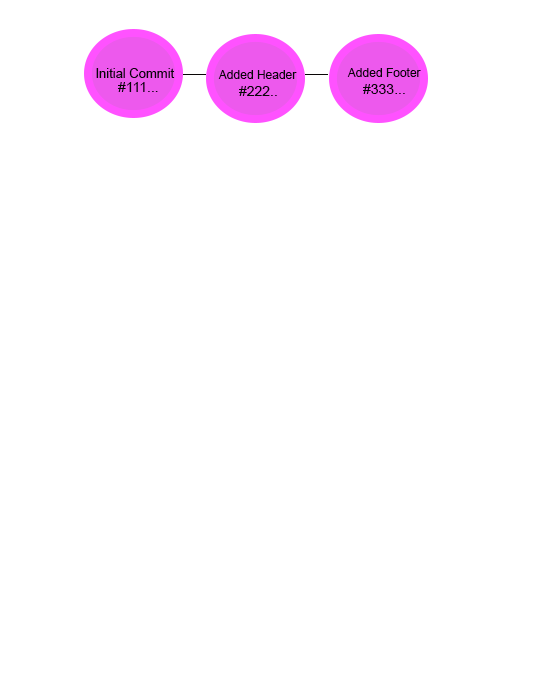
<style>
.page{position:relative;width:535px;height:673px;background:#ffffff}
.page>*{position:absolute;margin:0}
.t1{font:13px "ArialMT";color:#070707}
.t2{font:12px "ArialMT";color:#070707}
.t3{font:12px/60px "ArialMT";color:#070707}
.t4{font:14px/60px "ArialMT";color:#070707}
.t5{font:14px "ArialMT";color:#070707}
</style>
<div class="page">
<p class="t1" style="left:96px;top:68px;width:79px;height:10px">Initial Commit</p>
<p class="t2" style="left:218px;top:70px;width:79px;height:9px">Added Header</p>
<p class="t3" style="left:347px;top:68px;width:74px;height:9px">Added Footer<br><span class="t4">#</span></p>
<p class="t5" style="left:118px;top:82px;width:40px;height:10px">#111...</p>
<p class="t5" style="left:239px;top:86px;width:38px;height:10px">#222..</p>
<p class="t5" style="left:363px;top:84px;width:42px;height:10px">#333...</p>
</div>
